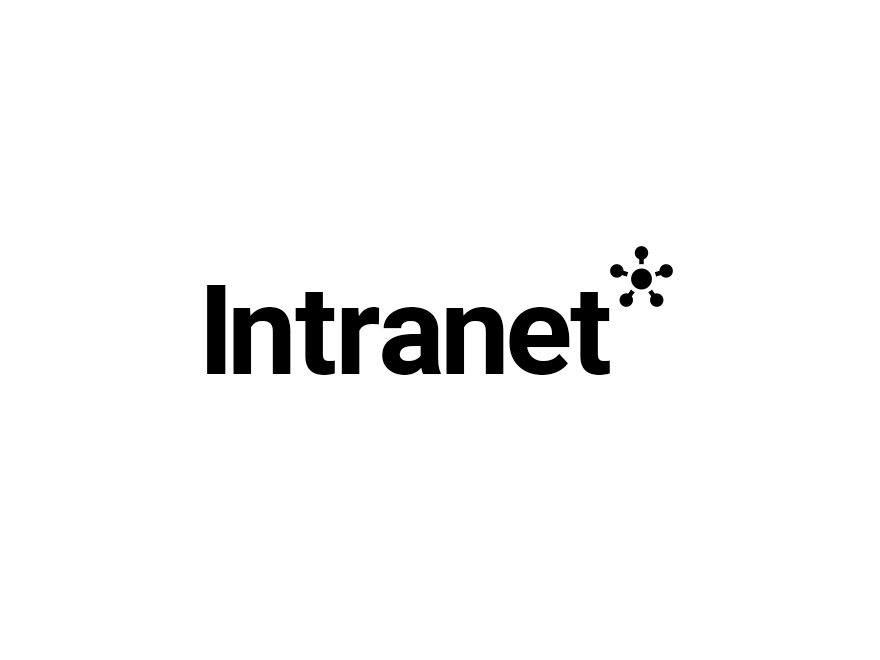
<style>
.page{position:relative;width:880px;height:660px;background:#ffffff}
.page>*{position:absolute;margin:0}
.t1{font:125px "Roboto-Bold";color:#000000}
</style>
<div class="page">
<p class="t1" style="left:207px;top:285px;width:403px;height:90px">Intranet</p>
</div>
